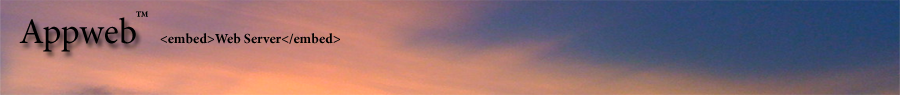
<style>
.page{position:relative;width:900px;height:95px}
.page>*{position:absolute;margin:0}
.t1{font:36px "MinionPro-Regular";color:#000000}
.t2{font:8px "MinionPro-Bold";color:#000000}
.t3{font:14px "MinionPro-Bold";color:#000000}
</style>
<div class="page">
<p class="t1" style="left:19px;top:17px;width:117px;height:35px">Appweb</p>
<p class="t2" style="left:136px;top:11px;width:12px;height:6px">TM</p>
<p class="t3" style="left:160px;top:33px;width:180px;height:11px">&lt;embed&gt;Web Server&lt;/embed&gt;</p>
</div>
